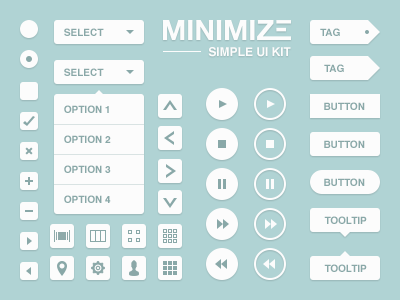
<style>
.page{position:relative;width:400px;height:300px;background:#b0d3d4}
.page>*{position:absolute;margin:0}
.t1{font:10px "Helvetica-Bold";color:#89a8a8;text-transform:uppercase}
.t2{font:12px "Helvetica-Bold";color:#fcfcfc;text-transform:uppercase}
</style>
<div class="page">
<p class="t1" style="left:64px;top:28px;width:40px;height:8px">SELECT</p>
<p class="t1" style="left:320px;top:28px;width:20px;height:8px">TAG</p>
<p class="t2" style="left:208px;top:47px;width:83px;height:10px">SIMPLE UI KIT</p>
<p class="t1" style="left:324px;top:64px;width:20px;height:8px">TAG</p>
<p class="t1" style="left:64px;top:68px;width:40px;height:8px">SELECT</p>
<p class="t1" style="left:324px;top:102px;width:41px;height:8px">BUTTON</p>
<p class="t1" style="left:64px;top:105px;width:45px;height:8px">OPTION 1</p>
<p class="t1" style="left:64px;top:135px;width:47px;height:8px">OPTION 2</p>
<p class="t1" style="left:324px;top:140px;width:41px;height:8px">BUTTON</p>
<p class="t1" style="left:64px;top:165px;width:47px;height:8px">OPTION 3</p>
<p class="t1" style="left:324px;top:178px;width:41px;height:8px">BUTTON</p>
<p class="t1" style="left:64px;top:195px;width:47px;height:8px">OPTION 4</p>
<p class="t1" style="left:324px;top:216px;width:43px;height:8px">tooltip</p>
<p class="t1" style="left:324px;top:264px;width:43px;height:8px">tooltip</p>
</div>
